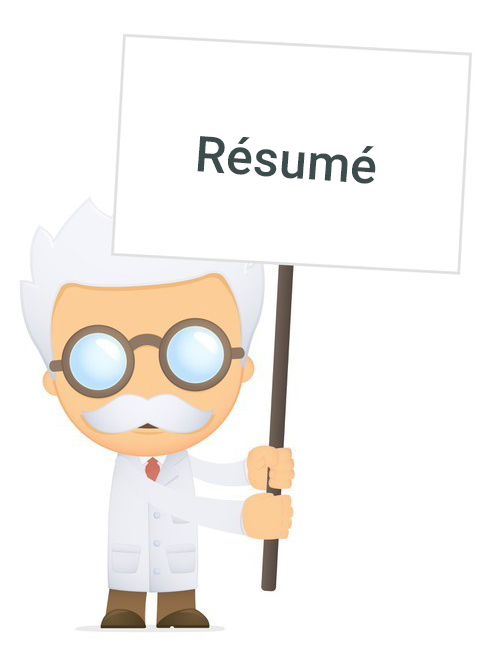
<style>
.page{position:relative;width:490px;height:670px;background:#ffffff}
.page>*{position:absolute;margin:0}
.t1{font:50px "Roboto-Medium";color:#3c4c4c}
</style>
<div class="page">
<p class="t1" style="left:197px;top:136px;width:179px;height:48px;rotate:4deg">Résumé</p>
</div>
